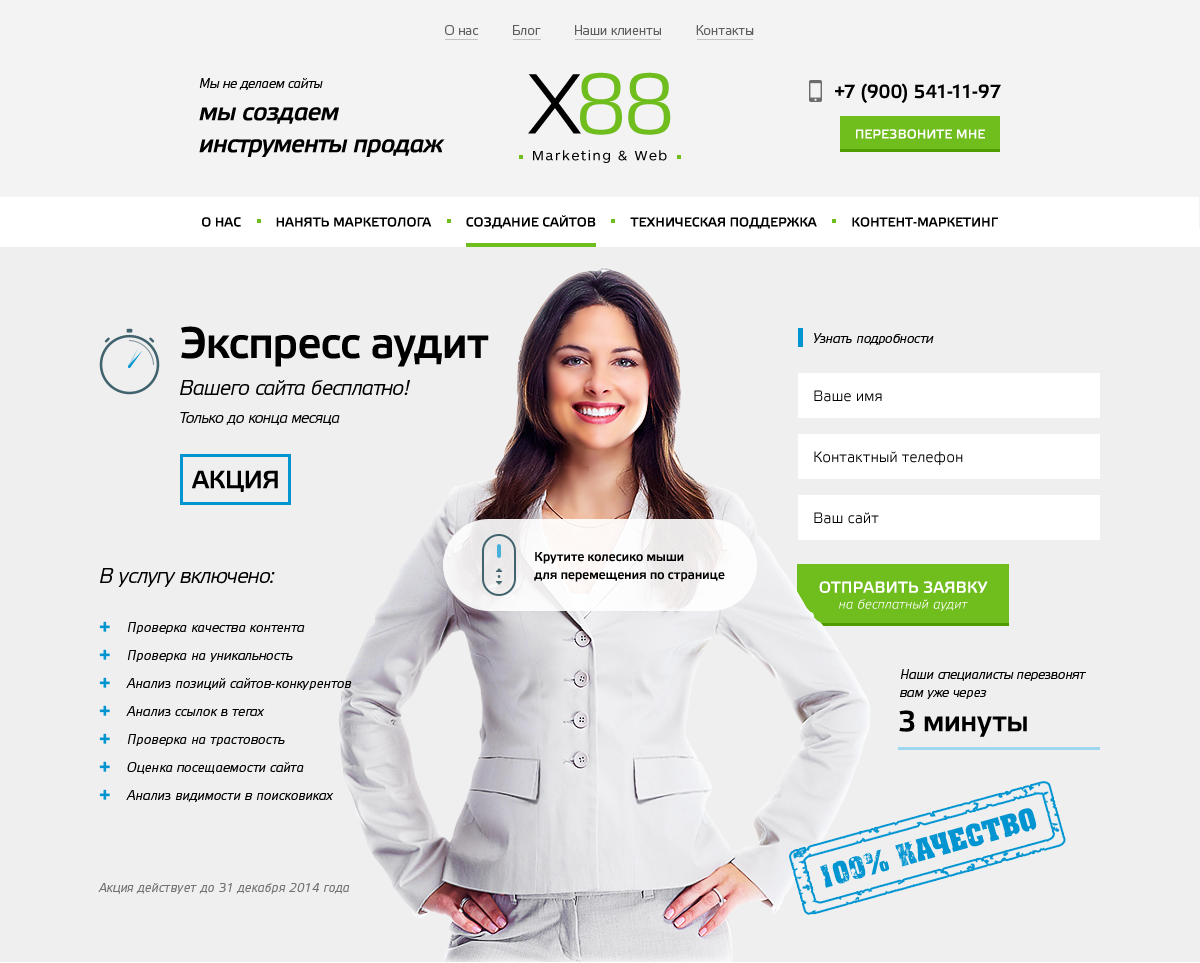
<style>
.page{position:relative;width:1200px;height:963px;background:#efefef}
.page>*{position:absolute;margin:0}
.t1{font:13px "ElektraLightPro";color:#5f5f5f}
.t2{font:13px "ElektraLightPro-Italic";color:#000000}
.t3{font:85px "ElektraLightPro";letter-spacing:-0.03em;color:#70bd1e}
.t4{font:85px "ElektraLightPro";letter-spacing:-0.06em;color:#000000}
.t5{font:19px "ElektraLightPro-Bold";color:#000000}
.t6{font:25px/32px "ElektraLightPro-BoldItalic";letter-spacing:-0.02em;color:#000000}
.t7{font:13px "ElektraLightPro-Bold";color:#ffffff;text-transform:uppercase}
.t8{font:14px "ARSMaquettePro-Regular";letter-spacing:0.11em;color:#000000}
.t9{font:13px "ElektraLightPro-Bold";color:#000000;text-transform:uppercase}
.t10{font:44px "ElektraLightPro-Bold";letter-spacing:-0.02em;color:#000000}
.t11{font:21px/28px "ElektraLightPro-Italic";letter-spacing:-0.02em;color:#000000}
.t12{font:15px/28px "ElektraLightPro-Italic";letter-spacing:-0.02em;color:#000000}
.t13{font:15px "ElektraLightPro";color:#000000}
.t14{font:25px "ElektraLightPro-Bold";letter-spacing:-0.02em;color:#000000}
.t15{font:13px/18px "ElektraLightPro-Bold";letter-spacing:-0.02em;color:#000000}
.t16{font:21px "ElektraLightPro-Italic";letter-spacing:-0.02em;color:#000000}
.t17{font:16px "ElektraLightPro-Bold";color:#ffffff;text-transform:uppercase}
.t18{font:13px "ElektraLightPro-Italic";letter-spacing:0.02em;color:#ffffff}
.t19{font:20px "ElektraLightPro-Bold";color:#0094d1}
.t20{font:13px/28px "ElektraLightPro-Italic";letter-spacing:0.02em;color:#000000}
.t21{font:13px/18px "ElektraLightPro-Italic";color:#000000}
.t22{font:29px "ElektraLightPro-Bold";letter-spacing:-0.02em;color:#000000}
.t23{font:30px "a_AssuanNr-Bold";color:#0094d1;text-transform:uppercase}
.t24{font:12px "ElektraLightPro-Italic";letter-spacing:0.02em;color:#737373}
</style>
<div class="page">
<p class="t1" style="left:445px;top:25px;width:309px;height:10px">О нас         Блог         Наши клиенты         Контакты</p>
<p class="t2" style="left:199px;top:78px;width:124px;height:12px">Мы не делаем сайты</p>
<p class="t3" style="left:528px;top:72px;width:143px;height:63px"><span class="t4">X</span>88</p>
<p class="t5" style="left:835px;top:83px;width:166px;height:20px">+7 (900) 541-11-97</p>
<p class="t6" style="left:199px;top:107px;width:246px;height:50px">мы создаем <br>инструменты продаж</p>
<p class="t7" style="left:856px;top:129px;width:129px;height:10px">перезвоните мне</p>
<p class="t8" style="left:533px;top:150px;width:134px;height:13px">Marketing &amp; Web</p>
<p class="t9" style="left:202px;top:215px;width:796px;height:14px">О нас          Нанять маркетолога          Создание сайтов          Техническая поддержка          Контент-маркетинг</p>
<p class="t10" style="left:181px;top:326px;width:308px;height:41px">Экспресс аудит</p>
<p class="t2" style="left:814px;top:333px;width:120px;height:12px">Узнать подробности</p>
<p class="t11" style="left:180px;top:380px;width:230px;height:46px">Вашего сайта бесплатно! <br><span class="t12">Только до конца месяца</span></p>
<p class="t13" style="left:814px;top:390px;width:68px;height:12px">Ваше имя</p>
<p class="t13" style="left:814px;top:451px;width:149px;height:14px">Контактный телефон</p>
<p class="t14" style="left:191px;top:470px;width:87px;height:22px">АКЦИЯ</p>
<p class="t13" style="left:814px;top:512px;width:65px;height:12px">Ваш сайт</p>
<p class="t15" style="left:534px;top:552px;width:191px;height:30px">Крутите колесико мыши<br>для перемещения по странице</p>
<p class="t16" style="left:100px;top:568px;width:175px;height:19px">В услугу включено:</p>
<p class="t17" style="left:819px;top:581px;width:169px;height:12px">Отправить заявку</p>
<p class="t18" style="left:839px;top:599px;width:129px;height:12px">на бесплатный аудит</p>
<p class="t19" style="left:99px;top:621px;width:11px;height:11px">+</p>
<p class="t20" style="left:126px;top:622px;width:226px;height:180px">Проверка качества контента<br>Проверка на уникальность<br>Анализ позиций сайтов-конкурентов<br>Анализ ссылок в тегах<br>Проверка на трастовость<br>Оценка посещаемости сайта<br>Анализ видимости в поисковиках</p>
<p class="t19" style="left:99px;top:649px;width:11px;height:11px">+</p>
<p class="t19" style="left:99px;top:677px;width:11px;height:11px">+</p>
<p class="t21" style="left:900px;top:669px;width:186px;height:30px">Наши специалисты перезвонят вам уже через</p>
<p class="t19" style="left:99px;top:705px;width:11px;height:11px">+</p>
<p class="t22" style="left:899px;top:710px;width:128px;height:27px">3 минуты</p>
<p class="t19" style="left:99px;top:733px;width:11px;height:11px">+</p>
<p class="t19" style="left:99px;top:761px;width:11px;height:11px">+</p>
<p class="t19" style="left:99px;top:789px;width:11px;height:11px">+</p>
<p class="t23" style="left:820px;top:808px;width:217px;height:80px;rotate:-16deg">100% качество</p>
<p class="t24" style="left:98px;top:883px;width:252px;height:11px">Акция действует до 31 декабря 2014 года</p>
</div>
